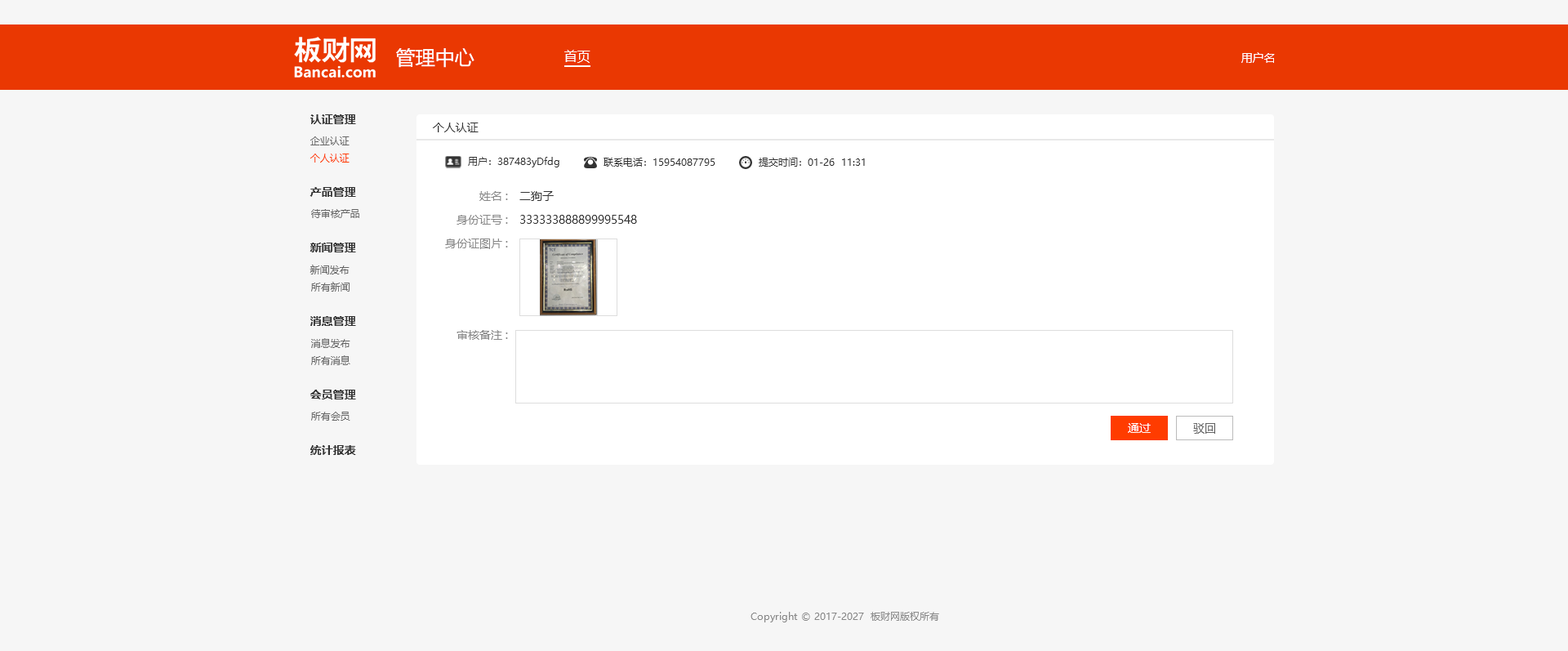
<style>
.page{position:relative;width:1568px;height:651px;background:#f6f6f6}
.page>*{position:absolute;margin:0}
.t1{font:19.6px "MicrosoftYaHei";color:#ffffff}
.t2{font:13.1px "MicrosoftYaHei";color:#ffffff}
.t3{font:11.4px "MicrosoftYaHei";color:#ffffff}
.t4{font:11.4px "MicrosoftYaHei-Bold";color:#333333}
.t5{font:11.4px "MicrosoftYaHei";color:#333333}
.t6{font:9.8px "MicrosoftYaHei";color:#666666}
.t7{font:9.8px "MicrosoftYaHei";color:#ff3c00}
.t8{font:9.8px "MicrosoftYaHei";color:#333333}
.t9{font:11.4px "MicrosoftYaHei";color:#888888}
.t10{font:11.4px "MicrosoftYaHei";color:#666666}
.t11{font:9.8px "MicrosoftYaHei";color:#888888}
</style>
<div class="page">
<p class="t1" style="left:396px;top:48px;width:78px;height:20px">管理中心</p>
<p class="t2" style="left:564px;top:50px;width:26px;height:13px">首页</p>
<p class="t3" style="left:1241px;top:52px;width:34px;height:11px">用户名</p>
<p class="t4" style="left:310px;top:114px;width:46px;height:10px">认证管理</p>
<p class="t5" style="left:433px;top:122px;width:46px;height:10px">个人认证</p>
<p class="t6" style="left:310px;top:136px;width:40px;height:9px">企业认证</p>
<p class="t7" style="left:310px;top:154px;width:40px;height:9px">个人认证</p>
<p class="t8" style="left:468px;top:157px;width:91px;height:10px">用户：387483yDfdg</p>
<p class="t8" style="left:604px;top:158px;width:111px;height:9px">联系电话：15954087795</p>
<p class="t8" style="left:759px;top:158px;width:106px;height:9px">提交时间：01-26  11:31</p>
<p class="t4" style="left:310px;top:187px;width:46px;height:10px">产品管理</p>
<p class="t9" style="left:479px;top:191px;width:29px;height:10px">姓名:</p>
<p class="t5" style="left:519px;top:191px;width:35px;height:10px">二狗子</p>
<p class="t6" style="left:311px;top:209px;width:48px;height:9px">待审核产品</p>
<p class="t9" style="left:457px;top:215px;width:51px;height:10px">身份证号:</p>
<p class="t5" style="left:520px;top:215px;width:117px;height:9px">333333888899995548</p>
<p class="t4" style="left:310px;top:243px;width:46px;height:9px">新闻管理</p>
<p class="t9" style="left:445px;top:238px;width:63px;height:11px">身份证图片:</p>
<p class="t6" style="left:310px;top:265px;width:40px;height:9px">新闻发布</p>
<p class="t6" style="left:311px;top:282px;width:39px;height:10px">所有新闻</p>
<p class="t4" style="left:310px;top:316px;width:46px;height:10px">消息管理</p>
<p class="t9" style="left:457px;top:330px;width:51px;height:10px">审核备注:</p>
<p class="t6" style="left:311px;top:338px;width:39px;height:10px">消息发布</p>
<p class="t6" style="left:311px;top:355px;width:39px;height:10px">所有消息</p>
<p class="t4" style="left:310px;top:390px;width:46px;height:9px">会员管理</p>
<p class="t6" style="left:311px;top:412px;width:39px;height:9px">所有会员</p>
<p class="t3" style="left:1128px;top:423px;width:23px;height:10px">通过</p>
<p class="t10" style="left:1193px;top:423px;width:22px;height:11px">驳回</p>
<p class="t4" style="left:310px;top:445px;width:46px;height:10px">统计报表</p>
<p class="t11" style="left:751px;top:612px;width:188px;height:10px">Copyright © 2017-2027  板财网版权所有</p>
</div>
